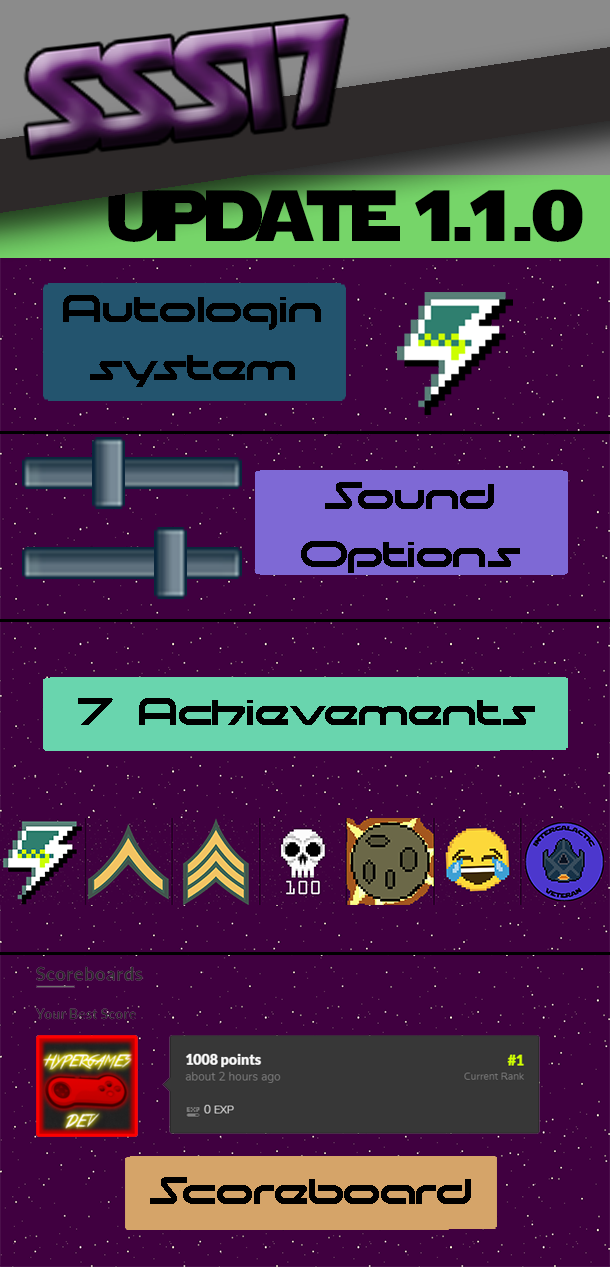
<style>
.page{position:relative;width:610px;height:1267px;background:#400040}
.page>*{position:absolute;margin:0}
.t1{font:72px "StarJedi";color:#000000}
.t2{font:48px "moonhouse";color:#000000}
</style>
<div class="page">
<p class="t1" style="left:108px;top:189px;width:475px;height:53px">update 1.1.0</p>
<p class="t2" style="left:63px;top:295px;width:258px;height:92px;text-align:center">Autologin<br>system</p>
<p class="t2" style="left:301px;top:482px;width:219px;height:91px;text-align:center">Sound<br>Options</p>
<p class="t2" style="left:78px;top:698px;width:457px;height:27px">7 Achievements</p>
<p class="t2" style="left:150px;top:1177px;width:321px;height:27px">Scoreboard</p>
</div>
